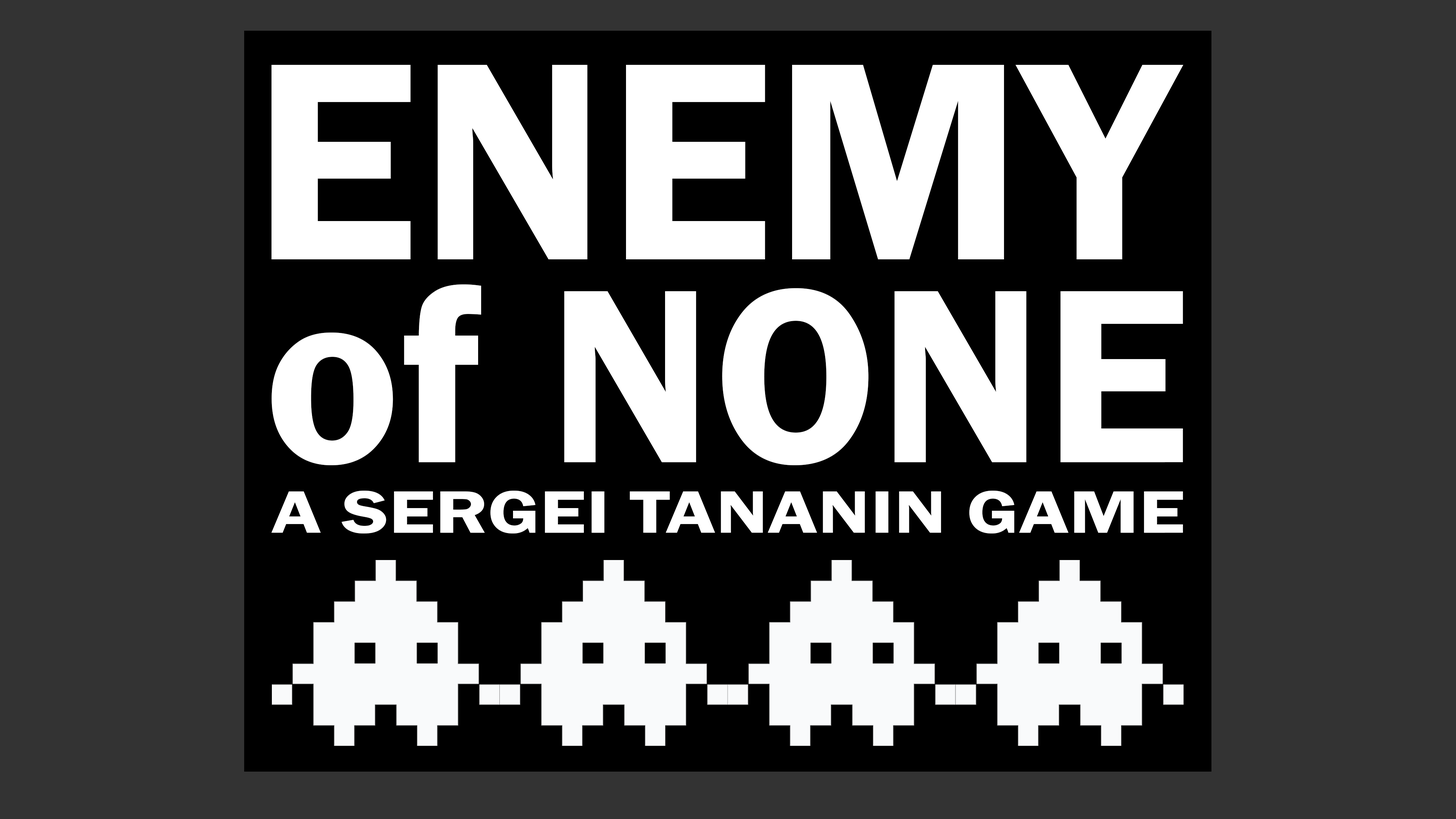
<style>
.page{position:relative;width:1456px;height:819px;background:#333333}
.page>*{position:absolute;margin:0}
.t1{font:68.2px/223px "FranklinGothic-Demi";color:#ffffff;text-transform:uppercase;scale:1.31 1}
.t2{font:266.9px/223px "FranklinGothic-Demi";color:#ffffff}
</style>
<div class="page">
<p class="t1" style="left:271px;top:65px;width:912px;height:468px"><span class="t2">ENEMY<br>of NONE<br></span>a Sergei Tananin game</p>
</div>
